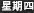
<style>
.page{position:relative;width:34px;height:13px}
.page>*{position:absolute;margin:0}
.t1{font:11.1px "AdobeHeitiStd-Regular";color:#ffffff}
</style>
<div class="page">
<p class="t1" style="left:1px;top:1px;width:33px;height:10px">星期四</p>
</div>
